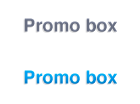
<style>
.page{position:relative;width:140px;height:104px;background:#ffffff}
.page>*{position:absolute;margin:0}
.t1{font:18px "Helvetica-Bold";color:#676d80}
.t2{font:18px "Helvetica-Bold";color:#0099ea}
</style>
<div class="page">
<p class="t1" style="left:24px;top:18px;width:93px;height:14px">Promo box</p>
<p class="t2" style="left:24px;top:70px;width:93px;height:14px">Promo box</p>
</div>
